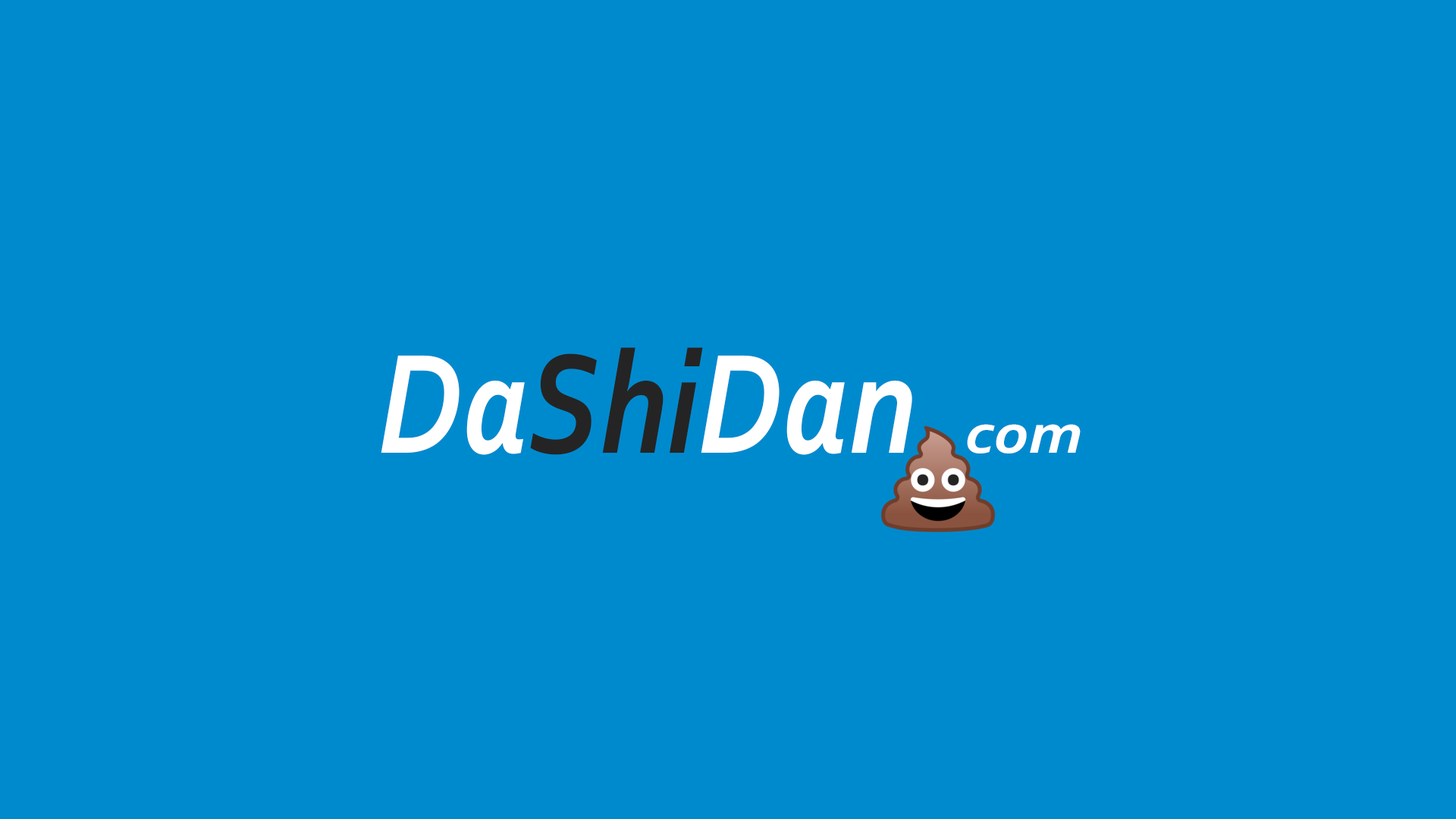
<style>
.page{position:relative;width:1456px;height:819px;background:#008ace}
.page>*{position:absolute;margin:0}
.t1{font:148.7px "Corbel-BoldItalic";color:#242424;scale:0.84 1}
.t2{font:148.7px "Corbel-BoldItalic";color:#ffffff;scale:0.84 1}
.t3{font:58.3px "Corbel-BoldItalic";color:#ffffff;scale:1.15 1}
</style>
<div class="page">
<p class="t1" style="left:381px;top:347px;width:531px;height:108px"><span class="t2">Da</span>Shi<span class="t2">Dan</span></p>
<p class="t3" style="left:967px;top:424px;width:114px;height:29px">com</p>
</div>
